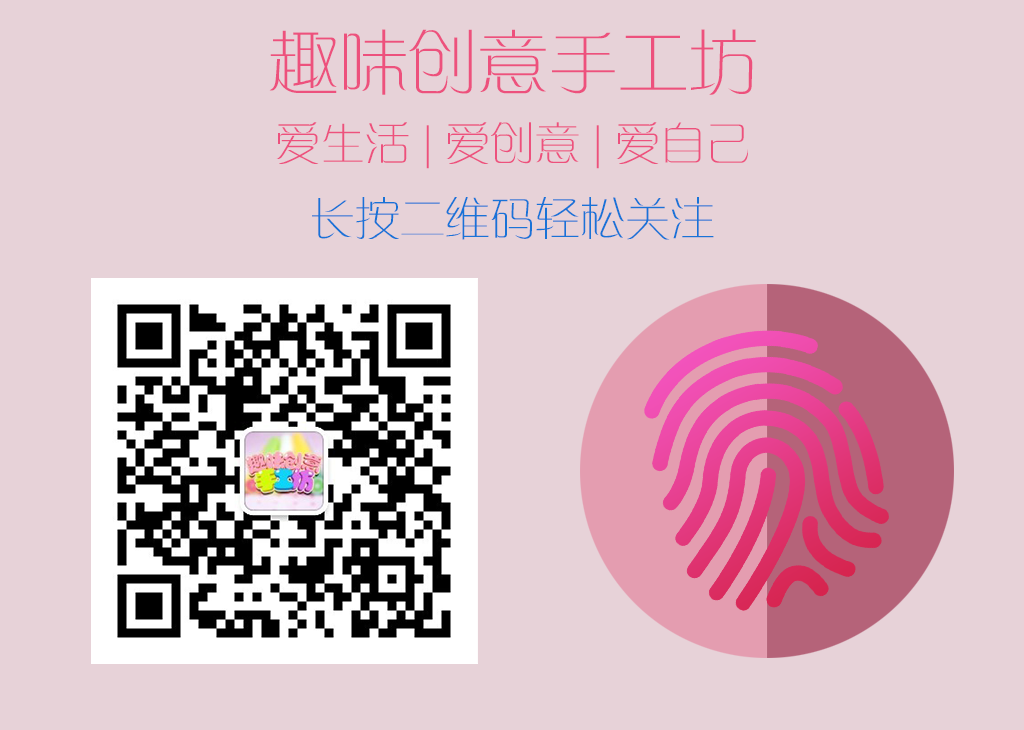
<style>
.page{position:relative;width:1024px;height:730px;background:#e7d2d8}
.page>*{position:absolute;margin:0}
.t1{font:70px "FZXQJW--GB1-0";color:#ed517d}
.t2{font:45px "FZXQJW--GB1-0";color:#ed517d}
.t3{font:45px "FZXQJW--GB1-0";color:#1973d7}
</style>
<div class="page">
<p class="t1" style="left:269px;top:29px;width:487px;height:66px">趣味创意手工坊</p>
<p class="t2" style="left:276px;top:122px;width:472px;height:47px">爱生活 | 爱创意 | 爱自己</p>
<p class="t3" style="left:312px;top:197px;width:402px;height:43px">长按二维码轻松关注</p>
</div>
